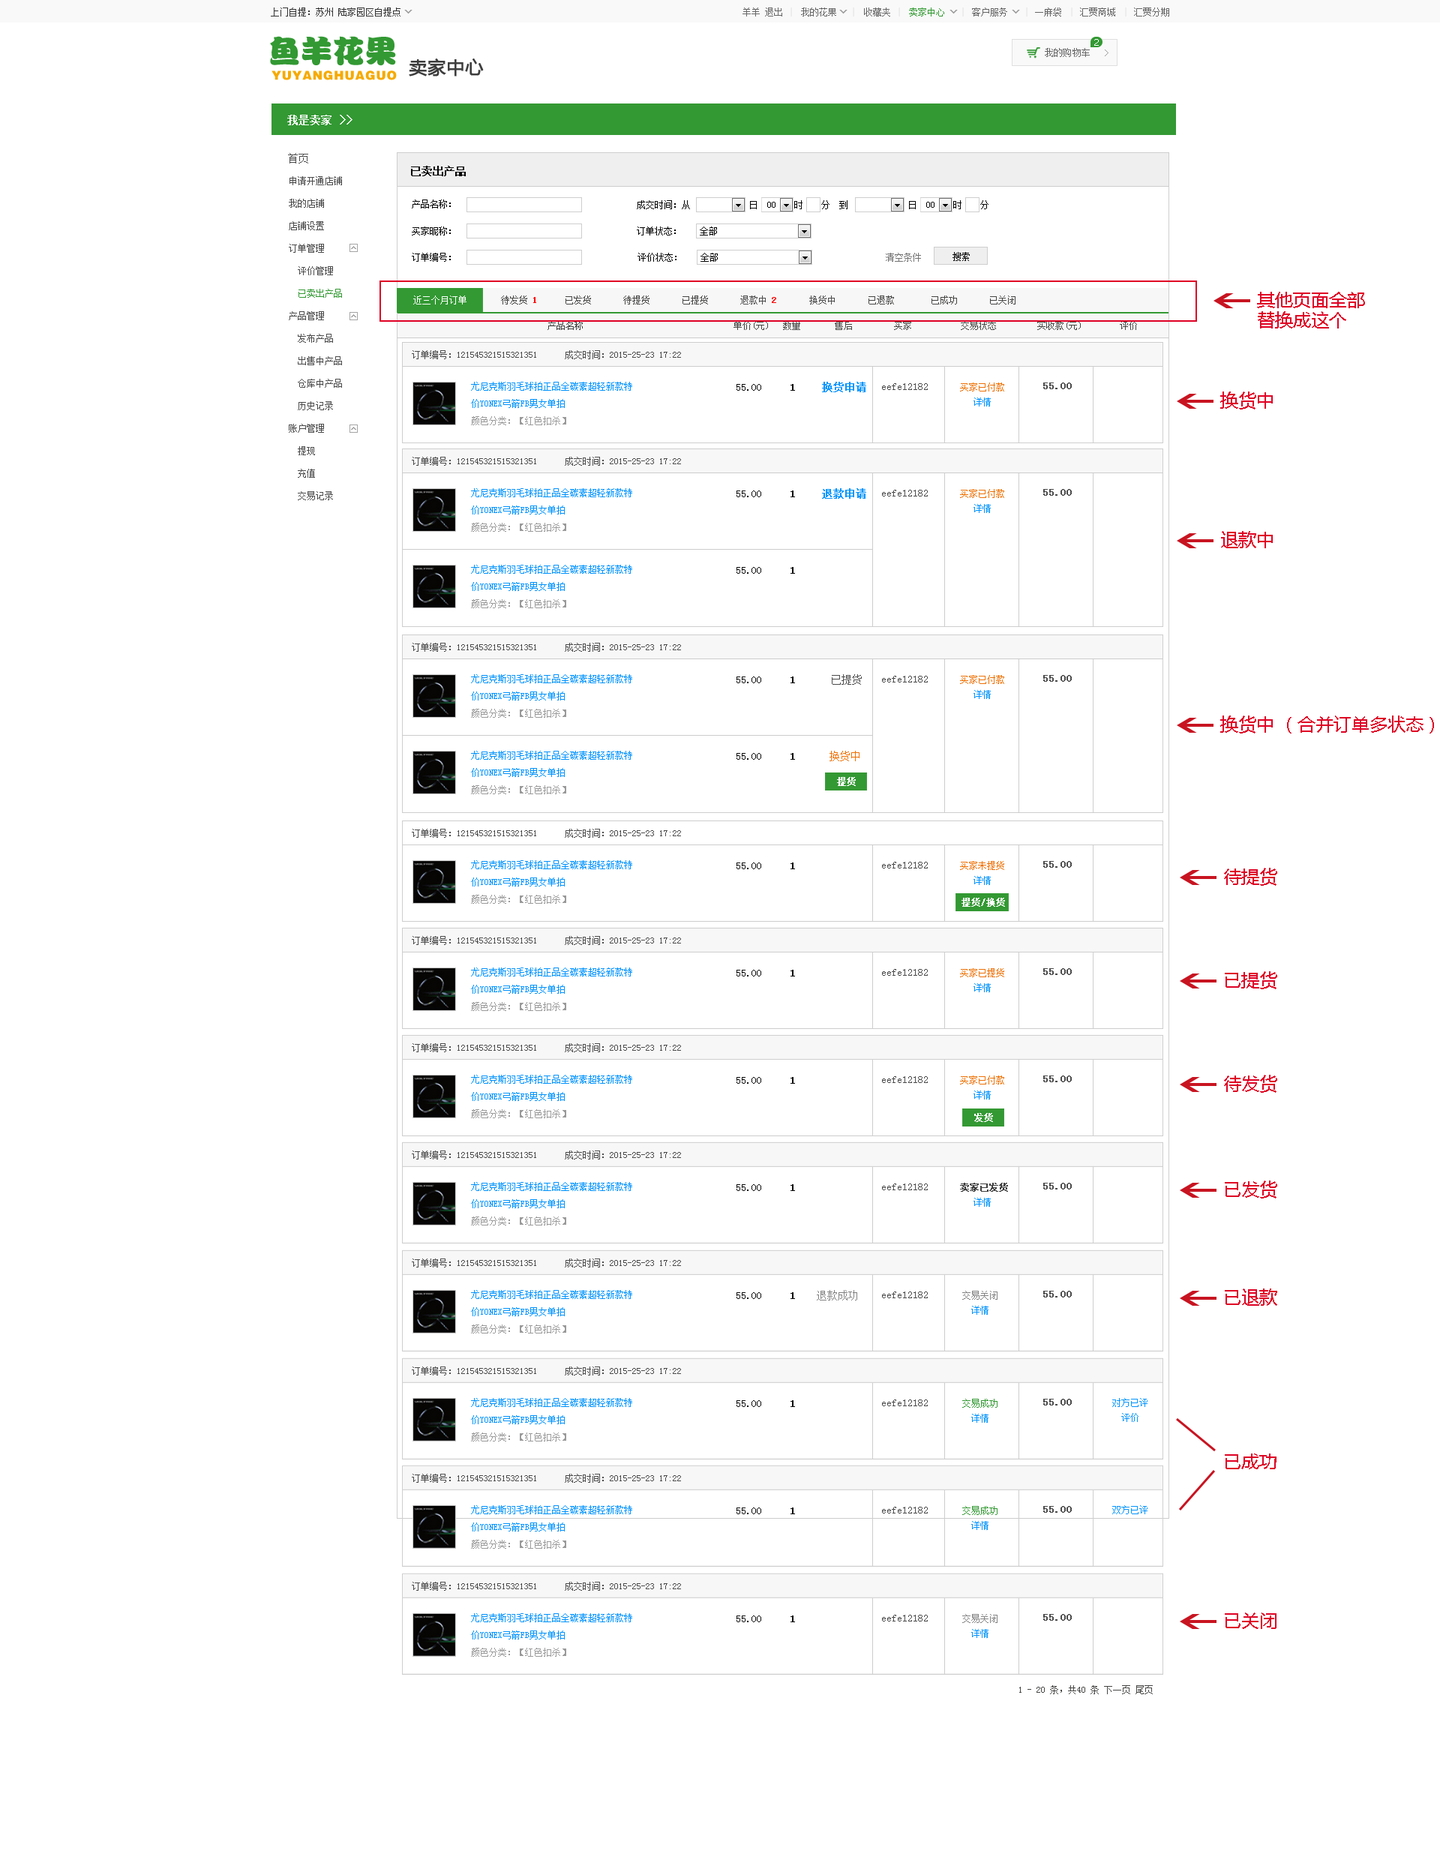
<style>
.page{position:relative;width:1440px;height:1851px;background:#ffffff}
.page>*{position:absolute;margin:0}
.t1{font:10.5px "SimSun";color:#4b4b4b}
.t2{font:10.5px "SimSun";color:#000000;font-weight:bold}
.t3{font:9px/22.5px "SimSun";color:#4b4b4b}
.t4{font:9px/22.5px "SimSun";color:#339933}
.t5{font:9px/26.3px "SimSun";color:#000000}
.t6{font:9px/13.5px "SimSun";color:#000000}
.t7{font:9px "SimSun";color:#000000}
.t8{font:9px "SimSun";color:#737373}
.t9{font:18px/20.3px "MicrosoftYaHei";color:#df0024}
.t10{font:9px "SimSun";color:#ffffff}
.t11{font:9px "SimSun";color:#454544}
.t12{font:9px "SimSun";color:#ff0000;font-weight:bold}
.t13{font:9px "SimSun";color:#4b4b4b}
.t14{font:9px "SimSun";color:#3e3e3e}
.t15{font:9px/17.3px "SimSun";color:#0094ff}
.t16{font:9px/17.3px "SimSun";color:#9a9a9a}
.t17{font:10.5px "SimSun";color:#050505}
.t18{font:10.5px "SimSun";color:#050505;font-weight:bold}
.t19{font:10.5px "SimSun";color:#0094ff;font-weight:bold}
.t20{font:9px/15px "SimSun";color:#ee7000}
.t21{font:9px/15px "SimSun";color:#0094ff}
.t22{font:10.5px "SimSun";color:#4b4b4b;font-weight:bold}
.t23{font:18px "MicrosoftYaHei";color:#df0024}
.t24{font:10.5px "SimSun";color:#ee7000}
.t25{font:9px "SimSun";color:#ffffff;font-weight:bold}
.t26{font:9px/15px "SimSun";color:#3e3e3e;font-weight:bold}
.t27{font:10.5px "SimSun";color:#818181}
.t28{font:9px/15px "SimSun";color:#818181}
.t29{font:9px/15px "SimSun";color:#339933}
.t30{font:9px "SimSun";color:#0094ff}
.t31{font:9.1px "SimSun";color:#454544}
</style>
<div class="page">
<p class="t1" style="left:288px;top:153px;width:20px;height:11px">首页</p>
<p class="t2" style="left:411px;top:166px;width:55px;height:10px">已卖出产品</p>
<p class="t3" style="left:289px;top:176px;width:53px;height:324px">申请开通店铺<br>我的店铺<br>店铺设置<br>订单管理<br>  评价管理<br>  <span class="t4">已卖出产品<br></span>产品管理<br>  发布产品<br>  出售中产品<br>  仓库中产品<br>  历史记录<br>账户管理<br>  提现<br>  充值<br>  交易记录</p>
<p class="t5" style="left:412px;top:200px;width:39px;height:62px"><span class="t6">产品名称：<br><br></span>买家昵称：<br>订单编号：</p>
<p class="t7" style="left:637px;top:200px;width:211px;height:9px">成交时间：从             日  00    时    分  到</p>
<p class="t7" style="left:909px;top:200px;width:79px;height:9px">日  00    时    分</p>
<p class="t7" style="left:637px;top:226px;width:80px;height:10px">订单状态：    全部</p>
<p class="t7" style="left:638px;top:253px;width:80px;height:9px">评价状态：    全部</p>
<p class="t8" style="left:886px;top:253px;width:35px;height:9px">清空条件</p>
<p class="t7" style="left:952px;top:252px;width:18px;height:9px">搜索</p>
<p class="t9" style="left:1257px;top:292px;width:108px;height:36px">其他页面全部<br>替换成这个</p>
<p class="t10" style="left:413px;top:296px;width:53px;height:8px">近三个月订单</p>
<p class="t11" style="left:501px;top:296px;width:515px;height:8px">待发货 <span class="t12">1 </span>     已发货       待提货       已提货     <span class="t13">  退款中 </span><span class="t12">2       </span><span class="t13">换货中</span>       已退款        已成功       已关闭</p>
<p class="t14" style="left:548px;top:321px;width:35px;height:9px">产品名称</p>
<p class="t11" style="left:734px;top:321px;width:34px;height:9px">单价(元)</p>
<p class="t11" style="left:783px;top:321px;width:17px;height:9px">数量</p>
<p class="t11" style="left:835px;top:321px;width:17px;height:9px">售后</p>
<p class="t11" style="left:894px;top:321px;width:17px;height:9px">买家</p>
<p class="t11" style="left:961px;top:321px;width:35px;height:9px">交易状态</p>
<p class="t11" style="left:1037px;top:321px;width:44px;height:9px">实收款(元)</p>
<p class="t11" style="left:1120px;top:321px;width:17px;height:9px">评价</p>
<p class="t13" style="left:412px;top:350px;width:269px;height:9px">订单编号：121545321515321351      成交时间：2015-25-23 17:22</p>
<p class="t15" style="left:471px;top:382px;width:161px;height:43px">尤尼克斯羽毛球拍正品全碳素超轻新款特<br>价YONEX弓箭FB男女单拍<br><span class="t16">颜色分类：【红色扣杀】</span></p>
<p class="t17" style="left:736px;top:382px;width:130px;height:10px">55.00   <span class="t18">  1     </span><span class="t19">换货申请</span></p>
<p class="t1" style="left:882px;top:383px;width:46px;height:7px">eefe12182</p>
<p class="t20" style="left:960px;top:382px;width:44px;height:24px">买家已付款<br>   <span class="t21">详情</span></p>
<p class="t22" style="left:1043px;top:382px;width:29px;height:7px">55.00</p>
<p class="t23" style="left:1220px;top:392px;width:53px;height:18px">换货中</p>
<p class="t13" style="left:412px;top:457px;width:269px;height:9px">订单编号：121545321515321351      成交时间：2015-25-23 17:22</p>
<p class="t15" style="left:471px;top:488px;width:161px;height:44px">尤尼克斯羽毛球拍正品全碳素超轻新款特<br>价YONEX弓箭FB男女单拍<br><span class="t16">颜色分类：【红色扣杀】</span></p>
<p class="t17" style="left:736px;top:488px;width:130px;height:11px">55.00   <span class="t18">  1     </span><span class="t19">退款申请</span></p>
<p class="t1" style="left:882px;top:490px;width:46px;height:6px">eefe12182</p>
<p class="t20" style="left:960px;top:489px;width:44px;height:24px">买家已付款<br>   <span class="t21">详情</span></p>
<p class="t22" style="left:1043px;top:489px;width:29px;height:7px">55.00</p>
<p class="t23" style="left:1221px;top:531px;width:52px;height:17px">退款中</p>
<p class="t15" style="left:471px;top:565px;width:161px;height:43px">尤尼克斯羽毛球拍正品全碳素超轻新款特<br>价YONEX弓箭FB男女单拍<br><span class="t16">颜色分类：【红色扣杀】</span></p>
<p class="t17" style="left:736px;top:567px;width:59px;height:7px">55.00   <span class="t18">  1</span></p>
<p class="t13" style="left:412px;top:643px;width:269px;height:9px">订单编号：121545321515321351      成交时间：2015-25-23 17:22</p>
<p class="t15" style="left:471px;top:674px;width:161px;height:44px">尤尼克斯羽毛球拍正品全碳素超轻新款特<br>价YONEX弓箭FB男女单拍<br><span class="t16">颜色分类：【红色扣杀】</span></p>
<p class="t17" style="left:736px;top:674px;width:126px;height:11px">55.00   <span class="t18">  1      </span><span class="t1">已提货</span></p>
<p class="t1" style="left:882px;top:676px;width:46px;height:6px">eefe12182</p>
<p class="t20" style="left:960px;top:675px;width:44px;height:24px">买家已付款<br>   <span class="t21">详情</span></p>
<p class="t22" style="left:1043px;top:675px;width:29px;height:7px">55.00</p>
<p class="t23" style="left:1220px;top:716px;width:214px;height:18px">换货中 （合并订单多状态）</p>
<p class="t15" style="left:471px;top:751px;width:161px;height:43px">尤尼克斯羽毛球拍正品全碳素超轻新款特<br>价YONEX弓箭FB男女单拍<br><span class="t16">颜色分类：【红色扣杀】</span></p>
<p class="t17" style="left:736px;top:751px;width:124px;height:10px">55.00   <span class="t18">  1      </span><span class="t24">换货中</span></p>
<p class="t25" style="left:837px;top:777px;width:19px;height:9px">提货</p>
<p class="t13" style="left:412px;top:829px;width:269px;height:9px">订单编号：121545321515321351      成交时间：2015-25-23 17:22</p>
<p class="t15" style="left:471px;top:860px;width:161px;height:44px">尤尼克斯羽毛球拍正品全碳素超轻新款特<br>价YONEX弓箭FB男女单拍<br><span class="t16">颜色分类：【红色扣杀】</span></p>
<p class="t17" style="left:736px;top:862px;width:59px;height:7px">55.00   <span class="t18">  1</span></p>
<p class="t1" style="left:882px;top:862px;width:46px;height:6px">eefe12182</p>
<p class="t20" style="left:960px;top:861px;width:44px;height:24px">买家未提货<br>   <span class="t21">详情</span></p>
<p class="t22" style="left:1043px;top:861px;width:29px;height:7px">55.00</p>
<p class="t23" style="left:1224px;top:868px;width:53px;height:18px">待提货</p>
<p class="t25" style="left:962px;top:898px;width:43px;height:9px">提货/换货</p>
<p class="t13" style="left:412px;top:936px;width:269px;height:9px">订单编号：121545321515321351      成交时间：2015-25-23 17:22</p>
<p class="t15" style="left:471px;top:968px;width:161px;height:43px">尤尼克斯羽毛球拍正品全碳素超轻新款特<br>价YONEX弓箭FB男女单拍<br><span class="t16">颜色分类：【红色扣杀】</span></p>
<p class="t17" style="left:736px;top:970px;width:59px;height:6px">55.00   <span class="t18">  1</span></p>
<p class="t1" style="left:882px;top:969px;width:46px;height:7px">eefe12182</p>
<p class="t20" style="left:960px;top:968px;width:44px;height:24px">买家已提货<br>   <span class="t21">详情</span></p>
<p class="t22" style="left:1043px;top:968px;width:29px;height:7px">55.00</p>
<p class="t23" style="left:1225px;top:971px;width:52px;height:18px">已提货</p>
<p class="t13" style="left:412px;top:1043px;width:269px;height:9px">订单编号：121545321515321351      成交时间：2015-25-23 17:22</p>
<p class="t15" style="left:471px;top:1075px;width:161px;height:43px">尤尼克斯羽毛球拍正品全碳素超轻新款特<br>价YONEX弓箭FB男女单拍<br><span class="t16">颜色分类：【红色扣杀】</span></p>
<p class="t17" style="left:736px;top:1077px;width:59px;height:7px">55.00   <span class="t18">  1</span></p>
<p class="t1" style="left:882px;top:1076px;width:46px;height:7px">eefe12182</p>
<p class="t20" style="left:960px;top:1076px;width:44px;height:24px">买家已付款<br>   <span class="t21">详情</span></p>
<p class="t22" style="left:1043px;top:1076px;width:29px;height:6px">55.00</p>
<p class="t23" style="left:1224px;top:1075px;width:53px;height:18px">待发货</p>
<p class="t25" style="left:974px;top:1113px;width:19px;height:9px">发货</p>
<p class="t13" style="left:412px;top:1150px;width:269px;height:10px">订单编号：121545321515321351      成交时间：2015-25-23 17:22</p>
<p class="t15" style="left:471px;top:1182px;width:161px;height:44px">尤尼克斯羽毛球拍正品全碳素超轻新款特<br>价YONEX弓箭FB男女单拍<br><span class="t16">颜色分类：【红色扣杀】</span></p>
<p class="t23" style="left:1225px;top:1180px;width:52px;height:18px">已发货</p>
<p class="t17" style="left:736px;top:1184px;width:59px;height:7px">55.00   <span class="t18">  1</span></p>
<p class="t1" style="left:882px;top:1184px;width:46px;height:6px">eefe12182</p>
<p class="t26" style="left:960px;top:1183px;width:48px;height:24px">卖家已发货<br>   <span class="t21">详情</span></p>
<p class="t22" style="left:1043px;top:1183px;width:29px;height:7px">55.00</p>
<p class="t13" style="left:412px;top:1258px;width:269px;height:10px">订单编号：121545321515321351      成交时间：2015-25-23 17:22</p>
<p class="t23" style="left:1225px;top:1288px;width:52px;height:18px">已退款</p>
<p class="t15" style="left:471px;top:1290px;width:161px;height:44px">尤尼克斯羽毛球拍正品全碳素超轻新款特<br>价YONEX弓箭FB男女单拍<br><span class="t16">颜色分类：【红色扣杀】</span></p>
<p class="t17" style="left:736px;top:1290px;width:121px;height:10px">55.00   <span class="t18">  1    </span><span class="t27">退款成功</span></p>
<p class="t1" style="left:882px;top:1292px;width:46px;height:6px">eefe12182</p>
<p class="t28" style="left:962px;top:1291px;width:36px;height:24px">交易关闭<br>  <span class="t21">详情</span></p>
<p class="t22" style="left:1043px;top:1291px;width:29px;height:7px">55.00</p>
<p class="t13" style="left:412px;top:1366px;width:269px;height:10px">订单编号：121545321515321351      成交时间：2015-25-23 17:22</p>
<p class="t15" style="left:471px;top:1398px;width:161px;height:44px">尤尼克斯羽毛球拍正品全碳素超轻新款特<br>价YONEX弓箭FB男女单拍<br><span class="t16">颜色分类：【红色扣杀】</span></p>
<p class="t21" style="left:1112px;top:1398px;width:36px;height:24px">对方已评<br>  评价</p>
<p class="t17" style="left:736px;top:1400px;width:59px;height:7px">55.00   <span class="t18">  1</span></p>
<p class="t1" style="left:882px;top:1400px;width:46px;height:6px">eefe12182</p>
<p class="t29" style="left:962px;top:1399px;width:36px;height:24px">交易成功<br>  <span class="t21">详情</span></p>
<p class="t22" style="left:1043px;top:1399px;width:29px;height:7px">55.00</p>
<p class="t23" style="left:1225px;top:1454px;width:51px;height:15px">已成功</p>
<p class="t13" style="left:412px;top:1474px;width:269px;height:9px">订单编号：121545321515321351      成交时间：2015-25-23 17:22</p>
<p class="t15" style="left:471px;top:1505px;width:161px;height:44px">尤尼克斯羽毛球拍正品全碳素超轻新款特<br>价YONEX弓箭FB男女单拍<br><span class="t16">颜色分类：【红色扣杀】</span></p>
<p class="t30" style="left:1112px;top:1505px;width:36px;height:9px">双方已评</p>
<p class="t17" style="left:736px;top:1508px;width:59px;height:6px">55.00   <span class="t18">  1</span></p>
<p class="t1" style="left:882px;top:1507px;width:46px;height:7px">eefe12182</p>
<p class="t29" style="left:962px;top:1506px;width:36px;height:24px">交易成功<br>  <span class="t21">详情</span></p>
<p class="t22" style="left:1043px;top:1506px;width:29px;height:7px">55.00</p>
<p class="t13" style="left:412px;top:1582px;width:269px;height:9px">订单编号：121545321515321351      成交时间：2015-25-23 17:22</p>
<p class="t15" style="left:471px;top:1613px;width:161px;height:44px">尤尼克斯羽毛球拍正品全碳素超轻新款特<br>价YONEX弓箭FB男女单拍<br><span class="t16">颜色分类：【红色扣杀】</span></p>
<p class="t28" style="left:962px;top:1614px;width:36px;height:24px">交易关闭<br>  <span class="t21">详情</span></p>
<p class="t22" style="left:1043px;top:1614px;width:29px;height:7px">55.00</p>
<p class="t23" style="left:1225px;top:1612px;width:51px;height:17px">已关闭</p>
<p class="t17" style="left:736px;top:1616px;width:59px;height:6px">55.00   <span class="t18">  1</span></p>
<p class="t1" style="left:882px;top:1615px;width:46px;height:7px">eefe12182</p>
<p class="t31" style="left:1019px;top:1685px;width:134px;height:9px">1 - 20 条，共40 条 下一页 尾页</p>
</div>
